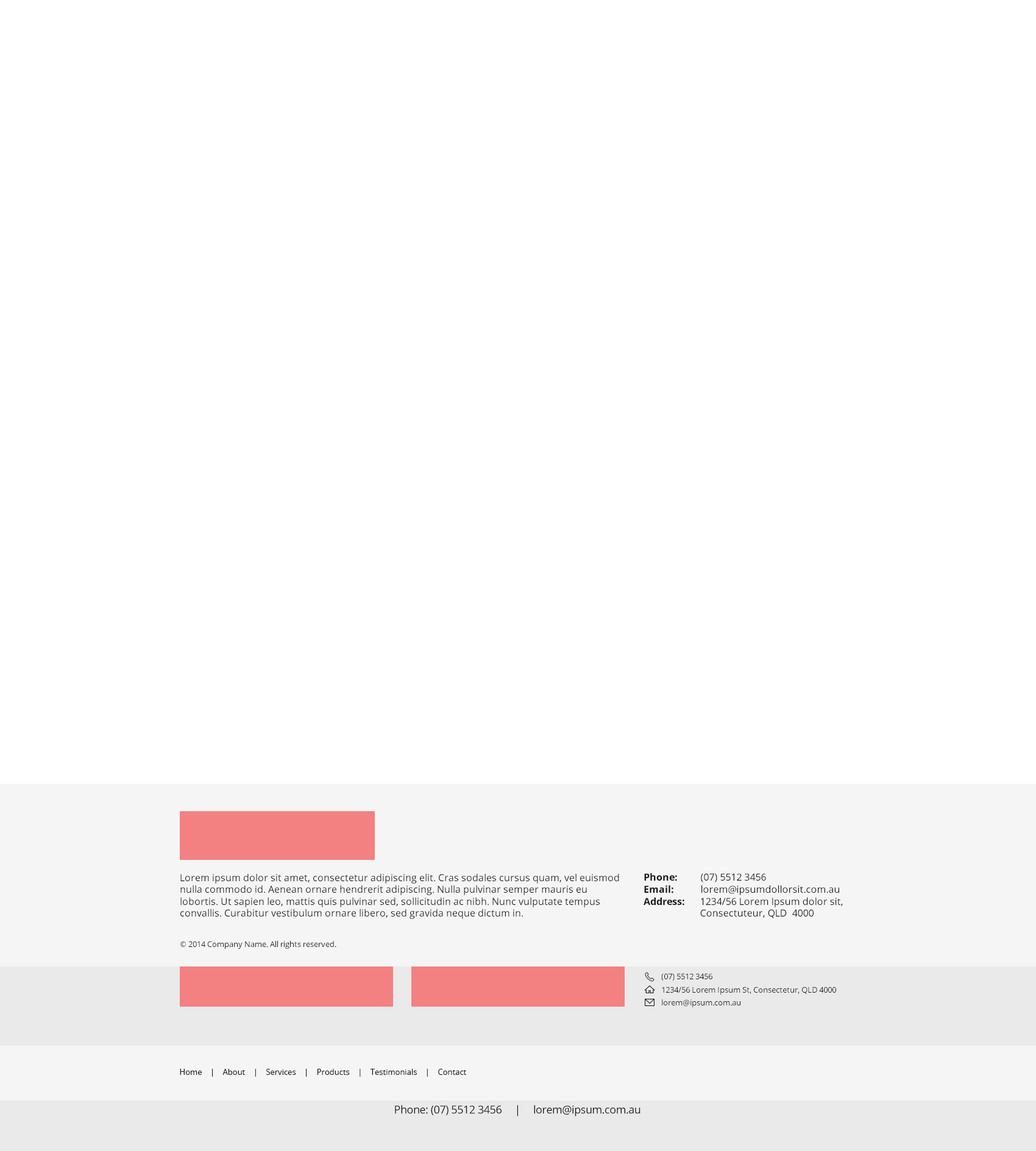
<style>
.page{position:relative;width:1036px;height:1151px;background:#ffffff}
.page>*{position:absolute;margin:0}
.t1{font:9.7px "OpenSans";color:#1a1a1a}
.t2{font:9.7px "OpenSans-Bold";color:#1a1a1a}
.t3{font:7.9px "OpenSans";color:#1a1a1a}
.t4{font:11px "OpenSans";letter-spacing:-0.025em;color:#1a1a1a}
</style>
<div class="page">
<p class="t1" style="left:180px;top:874px;width:439px;height:45px">Lorem ipsum dolor sit amet, consectetur adipiscing elit. Cras sodales cursus quam, vel euismod nulla commodo id. Aenean ornare hendrerit adipiscing. Nulla pulvinar semper mauris eu lobortis. Ut sapien leo, mattis quis pulvinar sed, sollicitudin ac nibh. Nunc vulputate tempus convallis. Curabitur vestibulum ornare libero, sed gravida neque dictum in.</p>
<p class="t2" style="left:644px;top:873px;width:33px;height:9px">Phone:</p>
<p class="t1" style="left:701px;top:874px;width:65px;height:9px">(07) 5512 3456</p>
<p class="t2" style="left:644px;top:885px;width:29px;height:9px">Email:</p>
<p class="t1" style="left:701px;top:885px;width:138px;height:11px">lorem@ipsumdollorsit.com.au</p>
<p class="t2" style="left:643px;top:897px;width:41px;height:9px">Address:</p>
<p class="t1" style="left:700px;top:897px;width:143px;height:22px">1234/56 Lorem Ipsum dolor sit,<br>Consectuteur, QLD  4000</p>
<p class="t3" style="left:180px;top:941px;width:156px;height:8px">© 2014 Company Name. All rights reserved.</p>
<p class="t3" style="left:661px;top:974px;width:51px;height:7px">(07) 5512 3456</p>
<p class="t3" style="left:662px;top:987px;width:174px;height:8px">1234/56 Lorem Ipsum St, Consectetur, QLD 4000</p>
<p class="t3" style="left:662px;top:1000px;width:78px;height:8px">lorem@ipsum.com.au</p>
<p class="t3" style="left:180px;top:1069px;width:286px;height:8px">Home    |    About    |    Services    |    Products    |    Testimonials    |    Contact</p>
<p class="t4" style="left:395px;top:1105px;width:245px;height:12px">Phone: (07) 5512 3456     |     lorem@ipsum.com.au</p>
</div>
